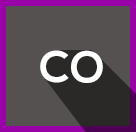
<style>
.page{position:relative;width:136px;height:132px;background:#545150}
.page>*{position:absolute;margin:0}
.t1{font:44px "NexaBold";color:#ffffff}
</style>
<div class="page">
<p class="t1" style="left:40px;top:50px;width:63px;height:33px">CO</p>
</div>
